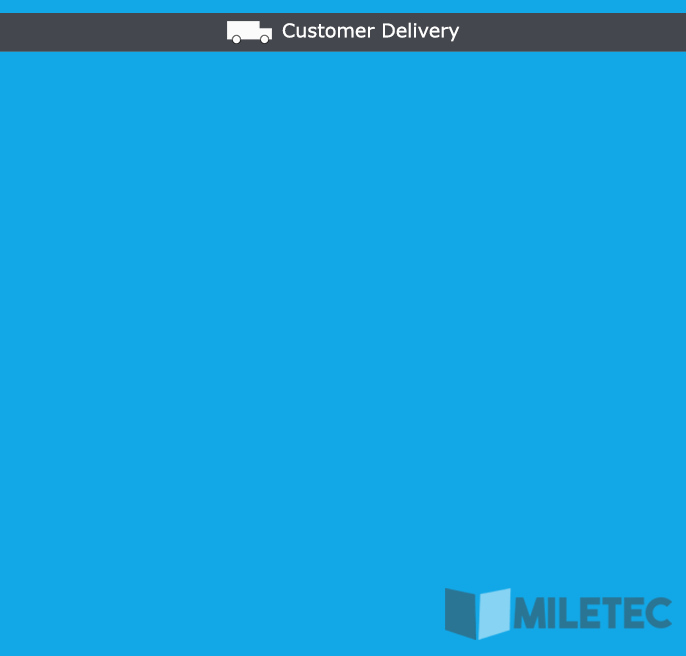
<style>
.page{position:relative;width:686px;height:656px;background:#12a8e7}
.page>*{position:absolute;margin:0}
.t1{font:18.9px "Verdana";color:#ffffff}
</style>
<div class="page">
<p class="t1" style="left:282px;top:22px;width:178px;height:20px">Customer Delivery</p>
</div>
